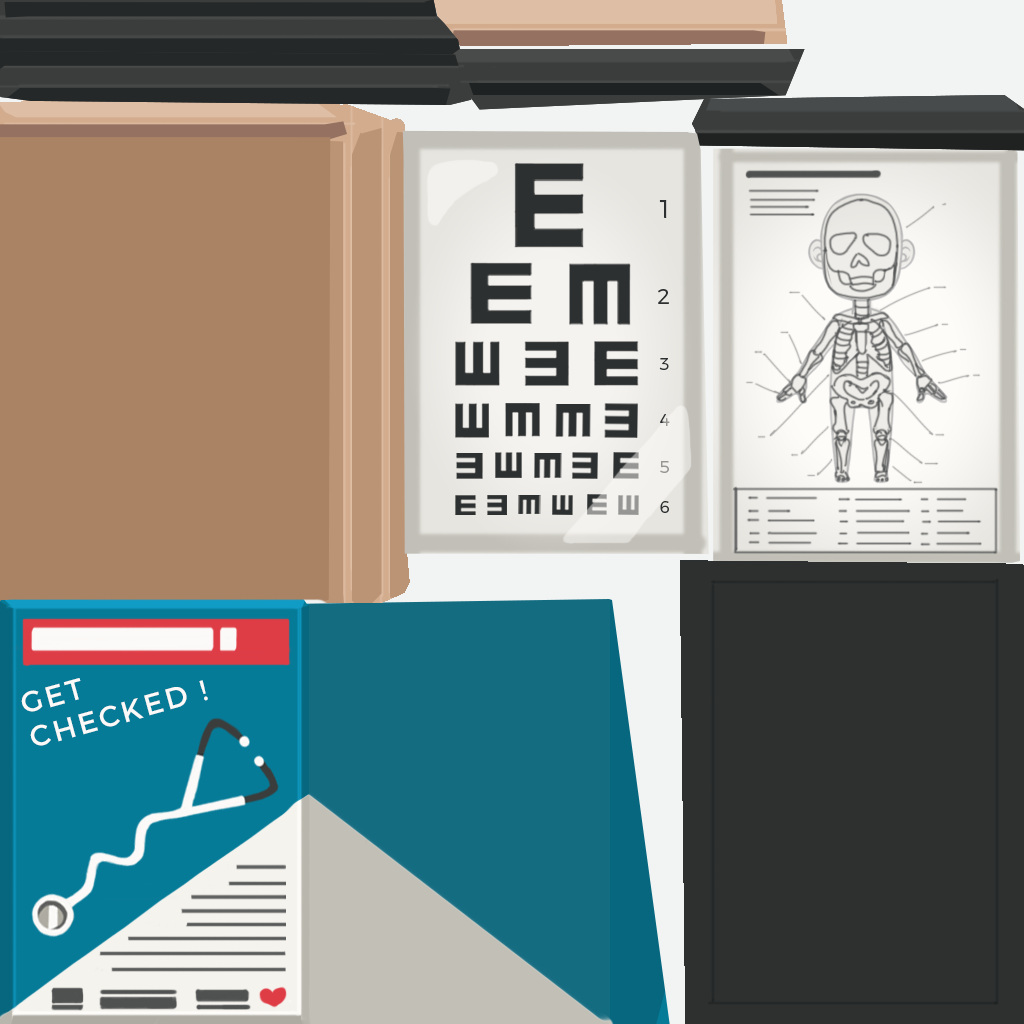
<style>
.page{position:relative;width:1024px;height:1024px}
.page>*{position:absolute;margin:0}
.t1{font:29.2px "Montserrat-Regular";letter-spacing:0.1em;color:#fbfaf8}
</style>
<div class="page">
<p class="t1" style="left:21px;top:678px;width:187px;height:68px;rotate:-16deg">GET<br>CHECKED !</p>
</div>
